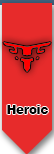
<style>
.page{position:relative;width:54px;height:154px;background:#e72b2b}
.page>*{position:absolute;margin:0}
.t1{font:11.7px "Arial-Black";letter-spacing:-0.01em;color:#000000}
</style>
<div class="page">
<p class="t1" style="left:7px;top:105px;width:42px;height:9px">Heroic</p>
</div>
